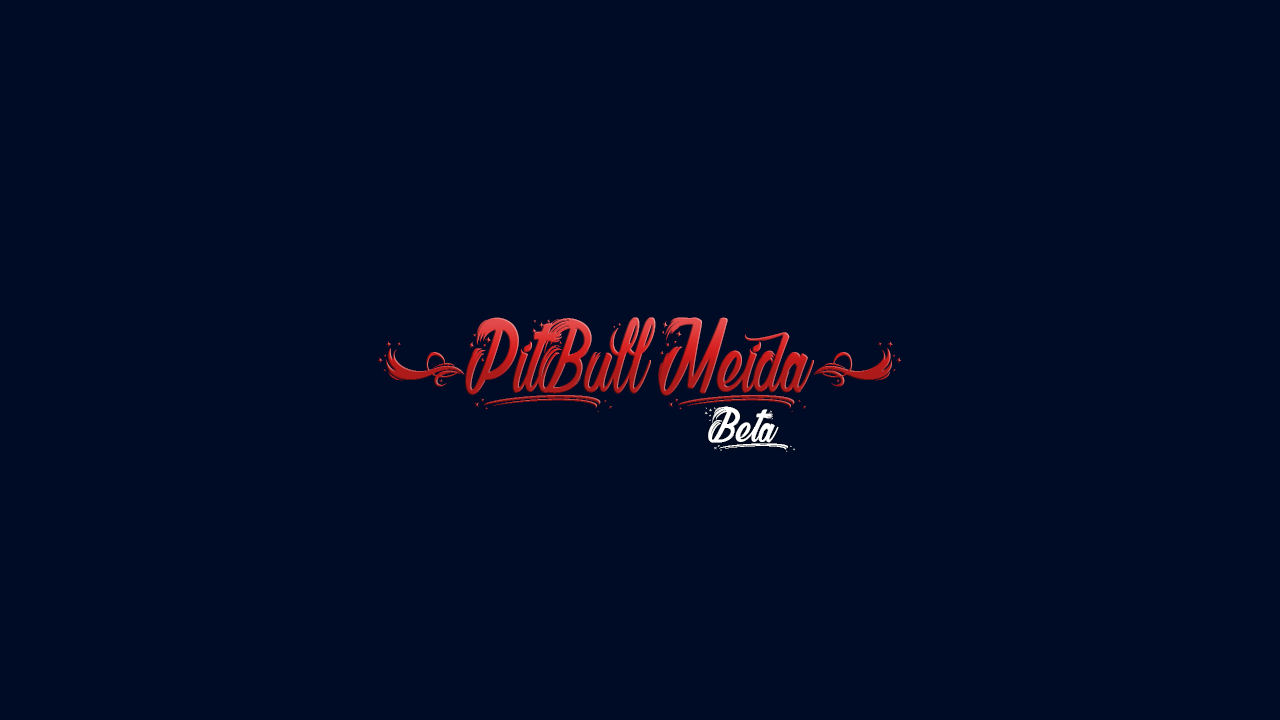
<style>
.page{position:relative;width:1280px;height:720px;background:#000b25}
.page>*{position:absolute;margin:0}
.t1{font:105.3px "ShelterPersonalUseOnly";scale:0.81 1}
.t2{font:50px "ShelterPersonalUseOnly";color:#ffffff}
</style>
<div class="page">
<p class="t1" style="left:377px;top:317px;width:524px;height:95px">(_PitBull _Meida)</p>
<p class="t2" style="left:704px;top:406px;width:91px;height:46px">_Beta</p>
</div>
